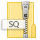
<style>
.page{position:relative;width:40px;height:40px;background:#ffffff}
.page>*{position:absolute;margin:0}
.t1{font:8px "SegoeUI"}
</style>
<div class="page">
<p class="t1" style="left:9px;top:21px;width:10px;height:7px">SQ</p>
</div>
